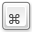
<style>
.page{position:relative;width:32px;height:32px}
.page>*{position:absolute;margin:0}
.t1{font:18px "AppleSymbols";color:#4e4e4e}
</style>
<div class="page">
<p class="t1" style="left:9px;top:14px;width:11px;height:10px">⌘</p>
</div>
